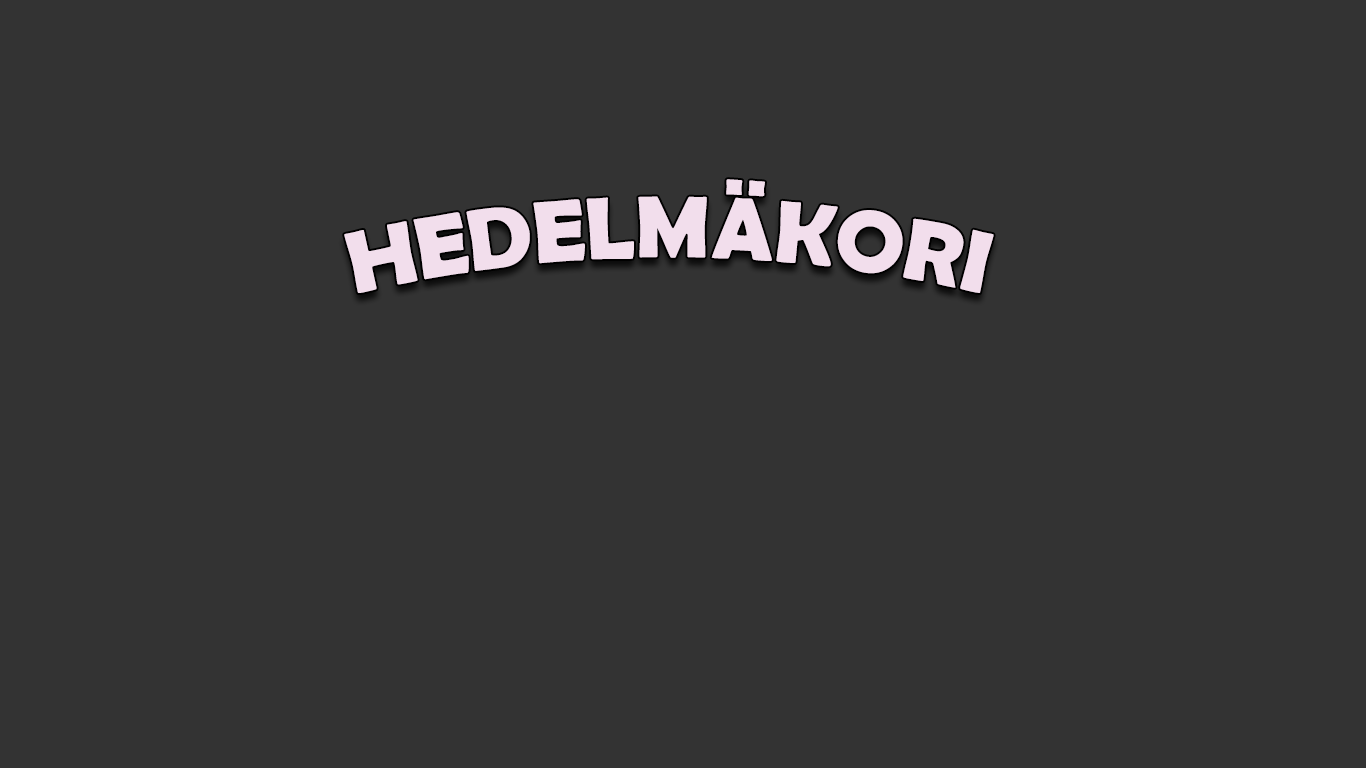
<style>
.page{position:relative;width:1366px;height:768px;background:#333333}
.page>*{position:absolute;margin:0}
.t1{font:88.6px "BerlinSansFBDemi-Bold";color:#f2deec}
</style>
<div class="page">
<p class="t1" style="left:344px;top:179px;width:650px;height:114px">HEDELMÄKORI</p>
</div>
